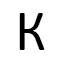
<style>
.page{position:relative;width:64px;height:64px;background:#ffffff}
.page>*{position:absolute;margin:0}
.t1{font:58.3px "Calibri";color:#000000}
</style>
<div class="page">
<p class="t1" style="left:19px;top:13px;width:26px;height:37px">К</p>
</div>
